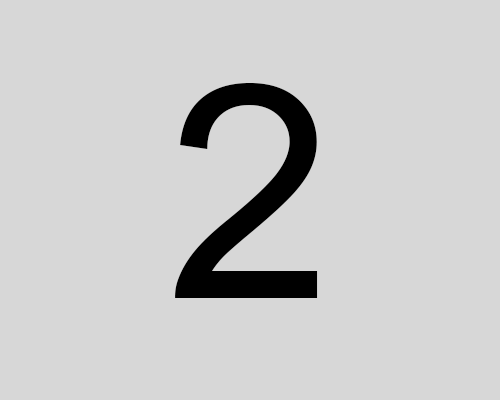
<style>
.page{position:relative;width:500px;height:400px;background:#d7d7d7}
.page>*{position:absolute;margin:0}
.t1{font:300px "ArialMT";color:#000000}
</style>
<div class="page">
<p class="t1" style="left:175px;top:83px;width:143px;height:215px">2</p>
</div>
